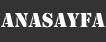
<style>
.page{position:relative;width:106px;height:42px;background:#333333}
.page>*{position:absolute;margin:0}
.t1{font:21.3px "Stencil";color:#ffffff}
</style>
<div class="page">
<p class="t1" style="left:1px;top:12px;width:104px;height:16px">Anasayfa</p>
</div>
